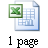
<style>
.page{position:relative;width:48px;height:48px;background:#ffffff}
.page>*{position:absolute;margin:0}
.t1{font:12px "TimesNewRomanPSMT";color:#000000}
</style>
<div class="page">
<p class="t1" style="left:9px;top:36px;width:29px;height:12px">1 page</p>
</div>
